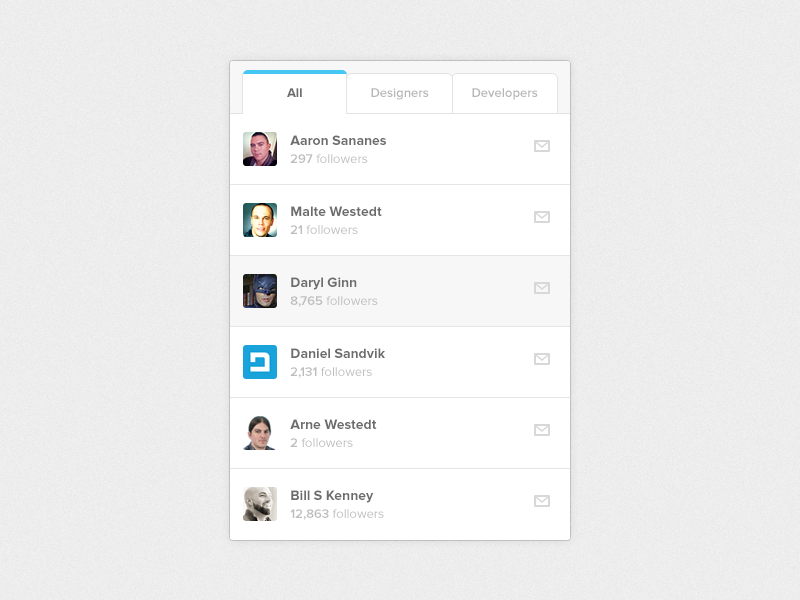
<style>
.page{position:relative;width:800px;height:600px;background:#ffffff}
.page>*{position:absolute;margin:0}
.t1{font:14px/18px "ProximaNova-Bold";color:#6c6c6c}
.t2{font:13px/18px "ProximaNova-Semibold";color:#bdbdbd}
.t3{font:13px/18px "ProximaNova-Regular";color:#bdbdbd}
</style>
<div class="page">
<p class="t1" style="left:290px;top:135px;width:96px;height:28px">Aaron Sananes<br><span class="t2">297 </span><span class="t3">followers</span></p>
<p class="t1" style="left:290px;top:206px;width:92px;height:28px">Malte Westedt<br><span class="t2">21 </span><span class="t3">followers</span></p>
<p class="t1" style="left:290px;top:277px;width:88px;height:30px">Daryl Ginn<br><span class="t2">8,765 </span><span class="t3">followers</span></p>
<p class="t1" style="left:290px;top:348px;width:95px;height:30px">Daniel Sandvik<br><span class="t2">2,131 </span><span class="t3">followers</span></p>
<p class="t1" style="left:290px;top:419px;width:87px;height:28px">Arne Westedt<br><span class="t2">2 </span><span class="t3">followers</span></p>
<p class="t1" style="left:290px;top:490px;width:94px;height:30px">Bill S Kenney<br><span class="t2">12,863 </span><span class="t3">followers</span></p>
</div>
